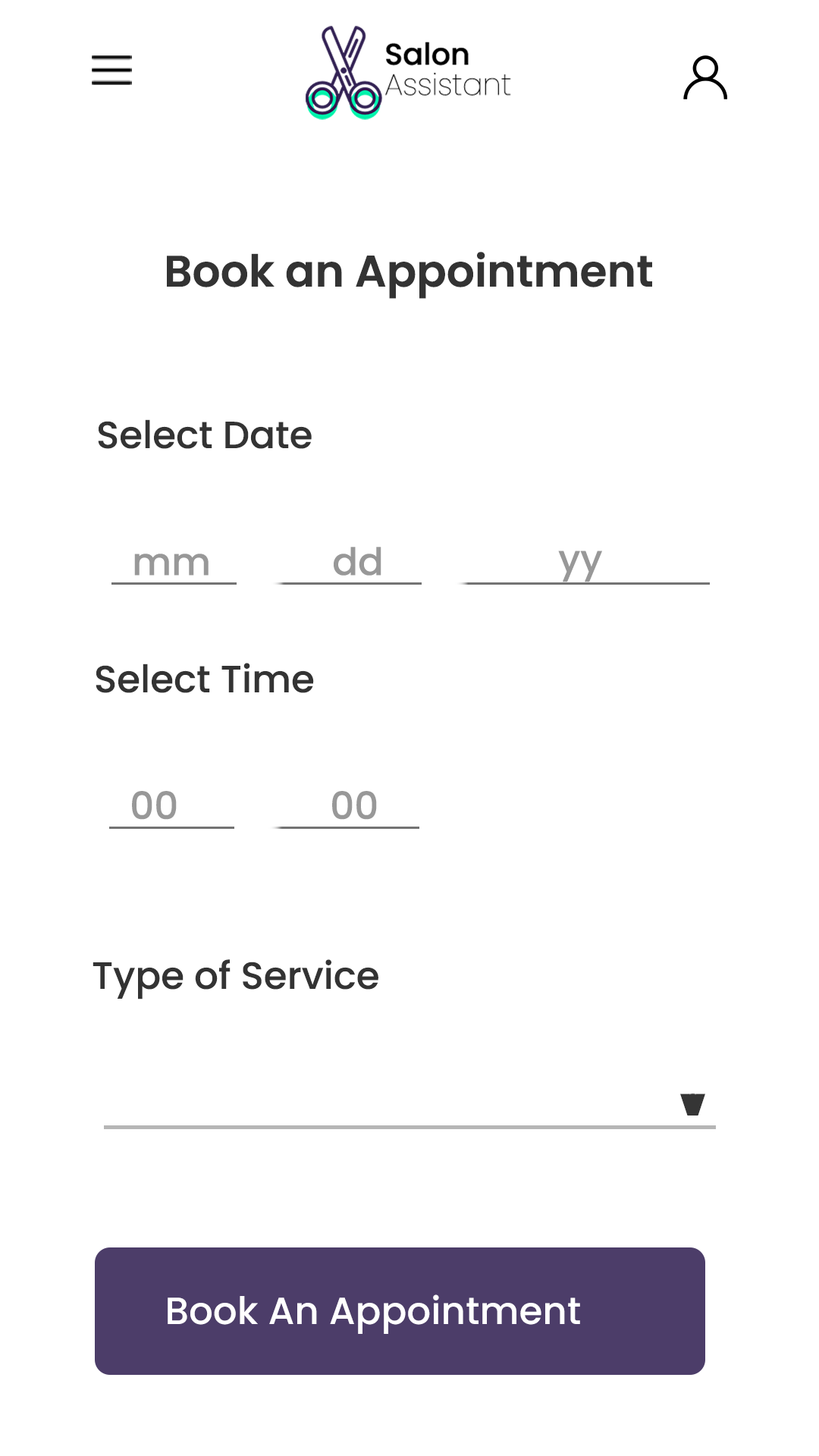
<style>
.page{position:relative;width:819px;height:1456px;background:#ffffff}
.page>*{position:absolute;margin:0}
.t1{font:44.2px "Poppins-SemiBold";color:#333333}
.t2{font:37.9px "Poppins-Medium";color:#333333}
.t3{font:37.9px "Poppins-Medium";color:#989898}
.t4{font:37.9px "Poppins-Black";color:#353535}
.t5{font:37.9px "Poppins-Medium";color:#ffffff}
</style>
<div class="page">
<p class="t1" style="left:167px;top:252px;width:485px;height:47px">Book an Appointment</p>
<p class="t2" style="left:98px;top:419px;width:214px;height:30px">Select Date</p>
<p class="t3" style="left:134px;top:554px;width:75px;height:22px">mm</p>
<p class="t3" style="left:334px;top:547px;width:47px;height:29px">dd</p>
<p class="t3" style="left:558px;top:551px;width:44px;height:31px">yy</p>
<p class="t2" style="left:96px;top:663px;width:218px;height:30px">Select Time</p>
<p class="t3" style="left:132px;top:791px;width:45px;height:29px">00</p>
<p class="t3" style="left:332px;top:791px;width:45px;height:29px">00</p>
<p class="t2" style="left:93px;top:959px;width:285px;height:40px">Type of Service</p>
<p class="t4" style="left:680px;top:1094px;width:25px;height:21px">v</p>
<p class="t5" style="left:168px;top:1294px;width:412px;height:40px">Book An Appointment</p>
</div>
